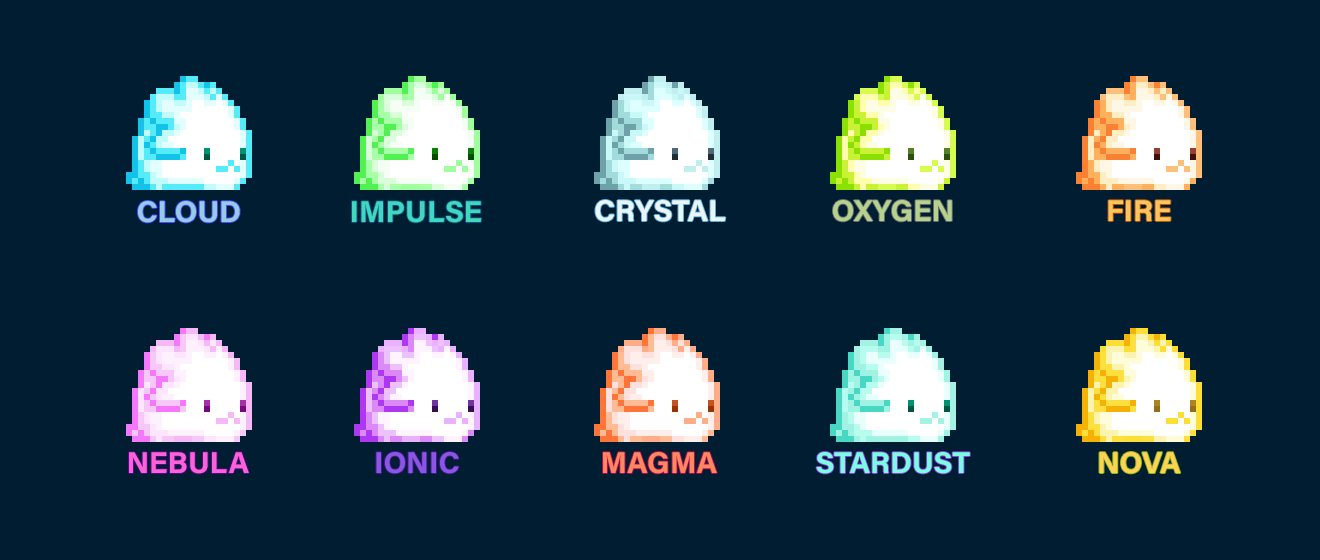
<style>
.page{position:relative;width:1320px;height:560px;background:#001d32}
.page>*{position:absolute;margin:0}
.t1{font:30px "AcuminConcept-Bold";color:#96cbe7}
.t2{font:30px "AcuminConcept-Bold";color:#42d6bf}
.t3{font:30px "AcuminConcept-Bold";color:#ecf4f5}
.t4{font:30px "AcuminConcept-Bold";color:#b6d18b}
.t5{font:30px "AcuminConcept-Bold";color:#fcc560}
.t6{font:30px "AcuminConcept-Bold";color:#fc62d7}
.t7{font:30px "AcuminConcept-Bold";color:#8a56e3}
.t8{font:30px "AcuminConcept-Bold";color:#fc8760}
.t9{font:30px "AcuminConcept-Bold";color:#78fce2}
.t10{font:30px "AcuminConcept-Bold";color:#ffd155}
</style>
<div class="page">
<p class="t1" style="left:138px;top:201px;width:102px;height:22px">CLOUD</p>
<p class="t2" style="left:352px;top:201px;width:130px;height:22px">IMPULSE</p>
<p class="t3" style="left:595px;top:200px;width:131px;height:22px">CRYSTAL</p>
<p class="t4" style="left:833px;top:200px;width:119px;height:22px">OXYGEN</p>
<p class="t5" style="left:1108px;top:200px;width:63px;height:21px">FIRE</p>
<p class="t6" style="left:129px;top:452px;width:120px;height:22px">NEBULA</p>
<p class="t7" style="left:376px;top:452px;width:83px;height:22px">IONIC</p>
<p class="t8" style="left:603px;top:452px;width:114px;height:22px">MAGMA</p>
<p class="t9" style="left:816px;top:452px;width:154px;height:22px">STARDUST</p>
<p class="t10" style="left:1099px;top:452px;width:82px;height:22px">NOVA</p>
</div>
